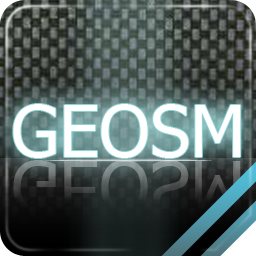
<style>
.page{position:relative;width:256px;height:256px}
.page>*{position:absolute;margin:0}
.t1{font:72px "Tahoma";color:#ffffff;text-transform:uppercase}
.t2{font:72px "Tahoma";text-transform:uppercase}
</style>
<div class="page">
<p class="t1" style="left:13px;top:104px;width:228px;height:54px">GEOSM</p>
<p class="t2" style="left:13px;top:160px;width:228px;height:54px">GEOSM</p>
</div>
